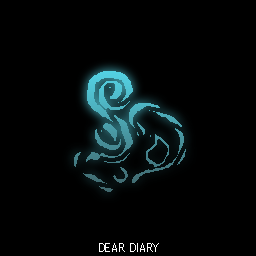
<style>
.page{position:relative;width:256px;height:256px;background:#000000}
.page>*{position:absolute;margin:0}
.t1{font:12px "TrebuchetMS";color:#ffffff}
</style>
<div class="page">
<p class="t1" style="left:99px;top:243px;width:60px;height:9px">DEAR DIARY</p>
</div>
